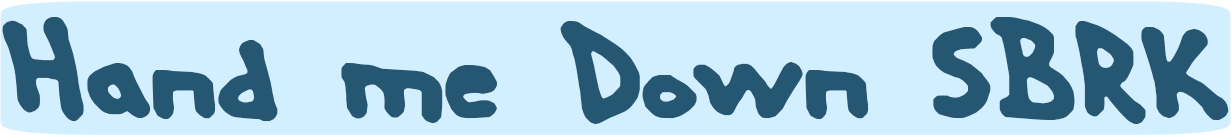
<style>
.page{position:relative;width:1231px;height:135px;background:#d2efff}
.page>*{position:absolute;margin:0}
.t1{font:151.4px "HandMeDownSBRK";color:#255773}
</style>
<div class="page">
<p class="t1" style="left:2px;top:17px;width:1227px;height:107px">Hand me Down SBRK</p>
</div>
